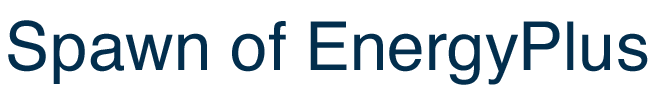
<style>
.page{position:relative;width:663px;height:100px;background:#ffffff}
.page>*{position:absolute;margin:0}
.t1{font:67.4px "Helvetica";color:#022e4d}
</style>
<div class="page">
<p class="t1" style="left:8px;top:20px;width:640px;height:65px">Spawn of EnergyPlus</p>
</div>
